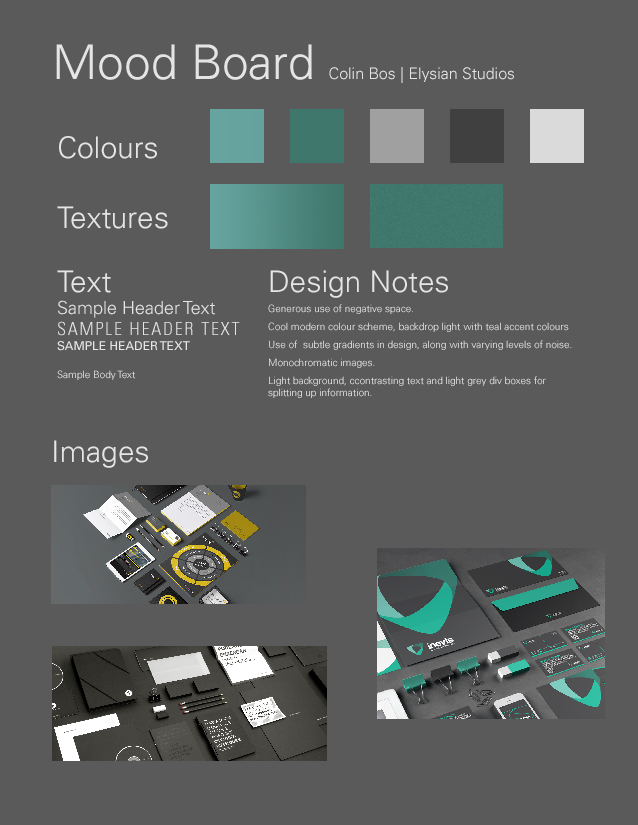
<style>
.page{position:relative;width:638px;height:825px;background:#5a5a5a}
.page>*{position:absolute;margin:0}
.t1{font:16px "Univers-Light";color:#e5e5e5}
.t2{font:48px "Univers-Light";color:#e5e5e5}
.t3{font:30px "Univers-Light";color:#e5e5e5}
.t4{font:18px "Univers-Light";color:#e5e5e5}
.t5{font:18px "Univers-CondensedLight";letter-spacing:0.1em;color:#e5e5e5;text-transform:uppercase}
.t6{font:12px "Univers";color:#e5e5e5;text-transform:uppercase}
.t7{font:10px "Univers-Light";color:#e5e5e5}
.t8{font:10px/18px "Univers-Light";color:#e5e5e5}
</style>
<div class="page">
<p class="t1" style="left:56px;top:44px;width:458px;height:39px"><span class="t2">Mood Board </span>Colin Bos | Elysian Studios</p>
<p class="t3" style="left:59px;top:136px;width:98px;height:23px">Colours</p>
<p class="t3" style="left:57px;top:206px;width:111px;height:23px">Textures</p>
<p class="t4" style="left:57px;top:270px;width:183px;height:110px"><span class="t3">Text<br></span>Sample Header Text<br><span class="t5">Sample Header Text<br></span><span class="t6">Sample Header Text<br><br></span><span class="t7">Sample Body Text</span></p>
<p class="t8" style="left:268px;top:270px;width:304px;height:128px"><span class="t3">Design Notes<br></span>Generous use of negative space.<br>Cool modern colour scheme, backdrop light with teal accent colours<br>Use of  subtle gradients in design, along with varying levels of noise.<br>Monochromatic images. <br>Light background, ccontrasting text and light grey div boxes for <br><span class="t7">splitting up information.</span></p>
<p class="t3" style="left:54px;top:440px;width:94px;height:28px">Images</p>
</div>
